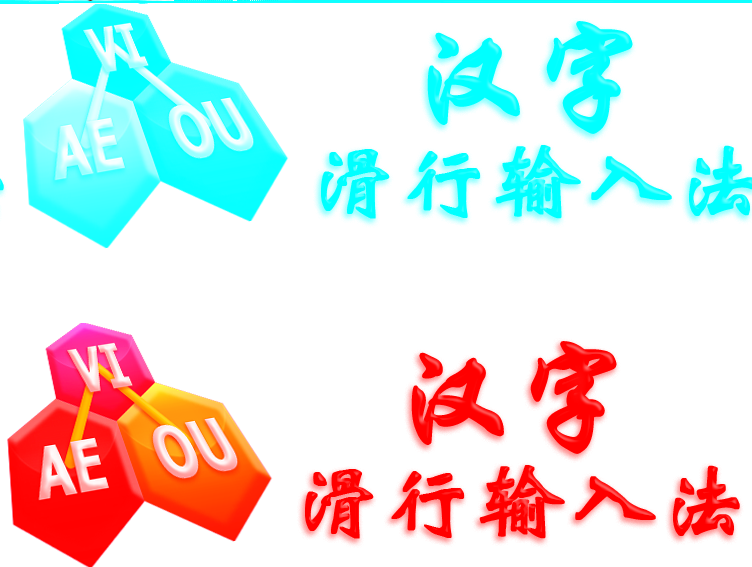
<style>
.page{position:relative;width:752px;height:567px;background:#ffffff}
.page>*{position:absolute;margin:0}
.t1{font:90px/120px "STXinwei";font-weight:bold}
.t2{font:120px/120px "STXingkai";font-weight:bold}
</style>
<div class="page">
<p class="t1" style="left:305px;top:18px;width:435px;height:198px;text-align:center"><span class="t2">汉字<br></span>滑行输入法</p>
</div>
